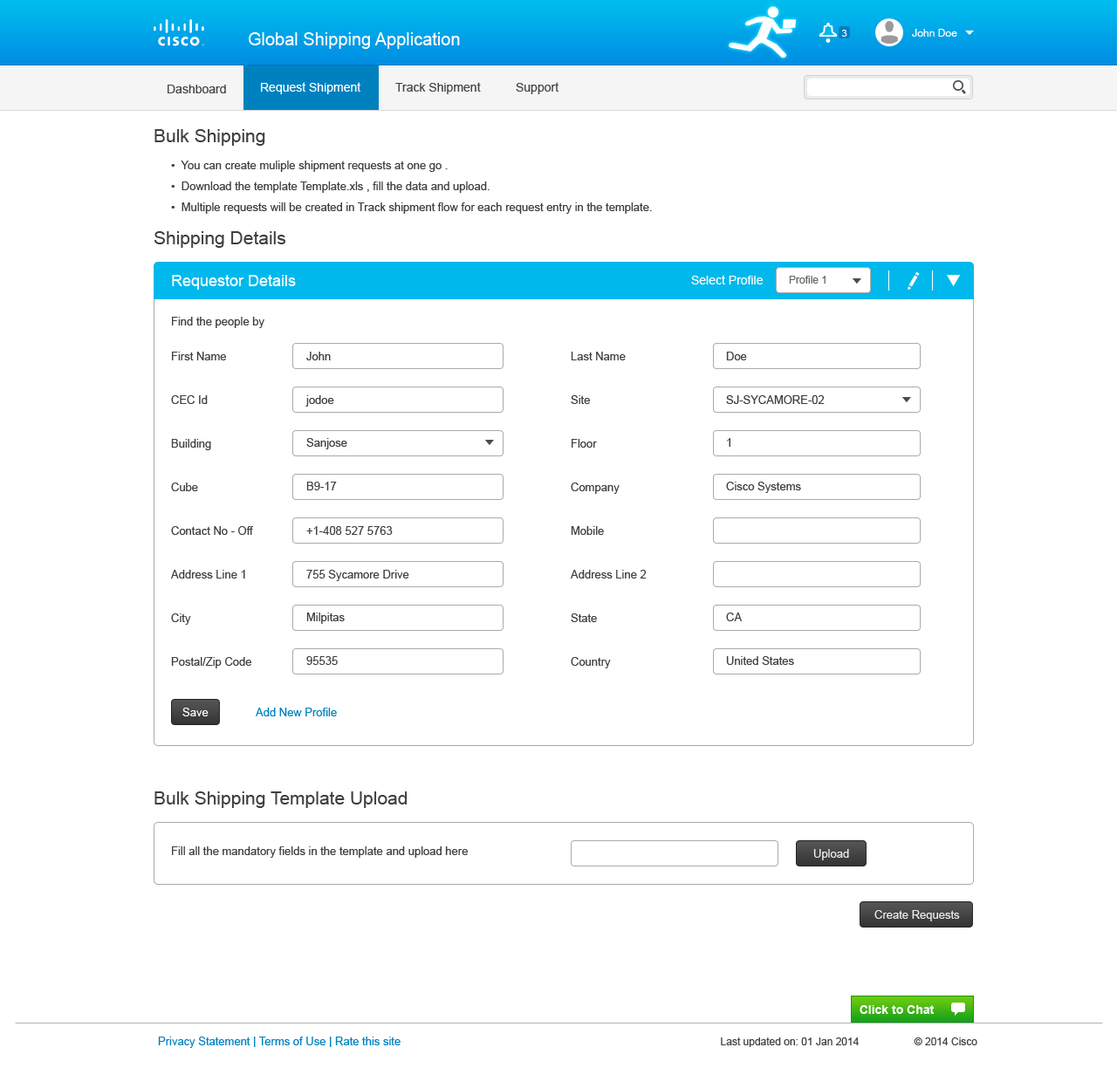
<style>
.page{position:relative;width:1117px;height:1068px;background:#ffffff}
.page>*{position:absolute;margin:0}
.t1{font:12.2px "ArialMT";color:#47444a}
.t2{font:12.2px "ArialMT";color:#ffffff}
.t3{font:18.3px "ArialMT";color:#3f3f3f}
.t4{font:11.3px/20.9px "ArialMT";color:#3f3f3f}
.t5{font:15.7px "ArialMT";color:#ffffff}
.t6{font:10.5px "ArialMT";color:#666666}
.t7{font:11.3px "ArialMT";color:#3f3f3f}
.t8{font:11.3px "ArialMT";color:#ffffff}
.t9{font:11.3px "ArialMT";color:#0081bf}
.t10{font:12.2px "Arial-BoldMT";color:#ffffff}
.t11{font:10.5px "ArialMT";color:#3f3f3f}
</style>
<div class="page">
<p class="t1" style="left:168px;top:85px;width:58px;height:8px">Dashboard</p>
<p class="t2" style="left:261px;top:82px;width:100px;height:12px">Request Shipment</p>
<p class="t1" style="left:395px;top:82px;width:86px;height:12px">Track Shipment</p>
<p class="t1" style="left:516px;top:82px;width:43px;height:12px">Support</p>
<p class="t3" style="left:154px;top:129px;width:111px;height:17px">Bulk Shipping</p>
<p class="t4" style="left:171px;top:161px;width:481px;height:53px">•  You can create muliple shipment requests at one go . <br>•  Download the template Template.xls , fill the data and upload. <br>•  Multiple requests will be created in Track shipment flow for each request entry in the template.</p>
<p class="t3" style="left:154px;top:231px;width:132px;height:17px">Shipping Details</p>
<p class="t5" style="left:172px;top:275px;width:124px;height:15px">Requestor Details</p>
<p class="t2" style="left:691px;top:275px;width:71px;height:9px">Select Profile</p>
<p class="t6" style="left:789px;top:276px;width:36px;height:8px">Profile 1</p>
<p class="t7" style="left:172px;top:317px;width:92px;height:11px">Find the people by</p>
<p class="t7" style="left:172px;top:352px;width:54px;height:8px">First Name</p>
<p class="t7" style="left:306px;top:352px;width:25px;height:8px">John</p>
<p class="t7" style="left:571px;top:352px;width:55px;height:8px">Last Name</p>
<p class="t7" style="left:726px;top:352px;width:21px;height:8px">Doe</p>
<p class="t7" style="left:171px;top:395px;width:37px;height:9px">CEC Id</p>
<p class="t7" style="left:305px;top:395px;width:29px;height:12px">jodoe</p>
<p class="t7" style="left:571px;top:395px;width:19px;height:9px">Site</p>
<p class="t7" style="left:726px;top:395px;width:98px;height:9px">SJ-SYCAMORE-02</p>
<p class="t7" style="left:306px;top:438px;width:41px;height:11px">Sanjose</p>
<p class="t7" style="left:727px;top:438px;width:3px;height:9px">1</p>
<p class="t7" style="left:171px;top:439px;width:40px;height:11px">Building</p>
<p class="t7" style="left:571px;top:439px;width:26px;height:9px">Floor</p>
<p class="t7" style="left:171px;top:482px;width:27px;height:9px">Cube</p>
<p class="t7" style="left:306px;top:482px;width:31px;height:8px">B9-17</p>
<p class="t7" style="left:571px;top:482px;width:48px;height:12px">Company</p>
<p class="t7" style="left:726px;top:482px;width:75px;height:11px">Cisco Systems</p>
<p class="t7" style="left:171px;top:526px;width:83px;height:9px">Contact No - Off</p>
<p class="t7" style="left:306px;top:526px;width:87px;height:9px">+1-408 527 5763</p>
<p class="t7" style="left:571px;top:526px;width:33px;height:9px">Mobile</p>
<p class="t7" style="left:171px;top:570px;width:74px;height:8px">Address Line 1</p>
<p class="t7" style="left:306px;top:570px;width:103px;height:11px">755 Sycamore Drive</p>
<p class="t7" style="left:571px;top:570px;width:75px;height:8px">Address Line 2</p>
<p class="t7" style="left:171px;top:613px;width:20px;height:12px">City</p>
<p class="t7" style="left:306px;top:612px;width:39px;height:12px">Milpitas</p>
<p class="t7" style="left:571px;top:613px;width:26px;height:9px">State</p>
<p class="t7" style="left:726px;top:612px;width:16px;height:9px">CA</p>
<p class="t7" style="left:171px;top:657px;width:80px;height:11px">Postal/Zip Code</p>
<p class="t7" style="left:306px;top:656px;width:32px;height:9px">95535</p>
<p class="t7" style="left:571px;top:657px;width:40px;height:11px">Country</p>
<p class="t7" style="left:726px;top:656px;width:68px;height:9px">United States</p>
<p class="t8" style="left:182px;top:708px;width:27px;height:8px">Save</p>
<p class="t9" style="left:256px;top:708px;width:81px;height:8px">Add New Profile</p>
<p class="t3" style="left:154px;top:791px;width:253px;height:17px">Bulk Shipping Template Upload</p>
<p class="t7" style="left:172px;top:846px;width:296px;height:12px">Fill all the mandatory fields in the template and upload here</p>
<p class="t8" style="left:813px;top:849px;width:36px;height:11px;opacity:0.9">Upload</p>
<p class="t8" style="left:874px;top:910px;width:86px;height:11px;opacity:0.9">Create Requests</p>
<p class="t10" style="left:859px;top:1005px;width:74px;height:9px">Click to Chat</p>
<p class="t9" style="left:158px;top:1036px;width:242px;height:12px">Privacy Statement | Terms of Use | Rate this site</p>
<p class="t11" style="left:721px;top:1037px;width:137px;height:10px">Last updated on: 01 Jan 2014</p>
<p class="t11" style="left:913px;top:1037px;width:64px;height:8px">© 2014 Cisco</p>
</div>
